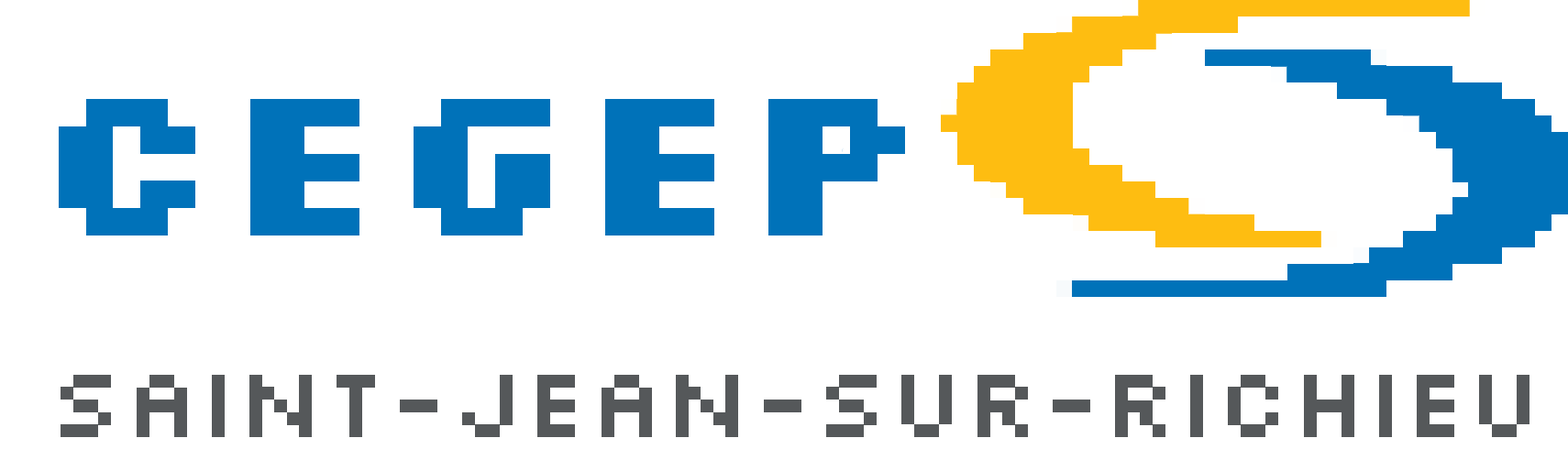
<style>
.page{position:relative;width:1568px;height:471px;background:#ffffff}
.page>*{position:absolute;margin:0}
.t1{font:229.2px "Silkscreen-Bold";color:#0072b9}
.t2{font:105.5px "Silkscreen";color:#55585a}
</style>
<div class="page">
<p class="t1" style="left:59px;top:99px;width:846px;height:137px">Cegep</p>
<p class="t2" style="left:61px;top:375px;width:1468px;height:62px">SAINT-JEAN-SUR-RICHIEU</p>
</div>
